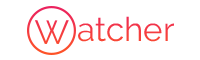
<style>
.page{position:relative;width:200px;height:60px;background:#ffffff}
.page>*{position:absolute;margin:0}
.t1{font:33.2px "Raleway-Regular";color:#f53d40}
</style>
<div class="page">
<p class="t1" style="left:78px;top:16px;width:96px;height:26px">atcher</p>
</div>
